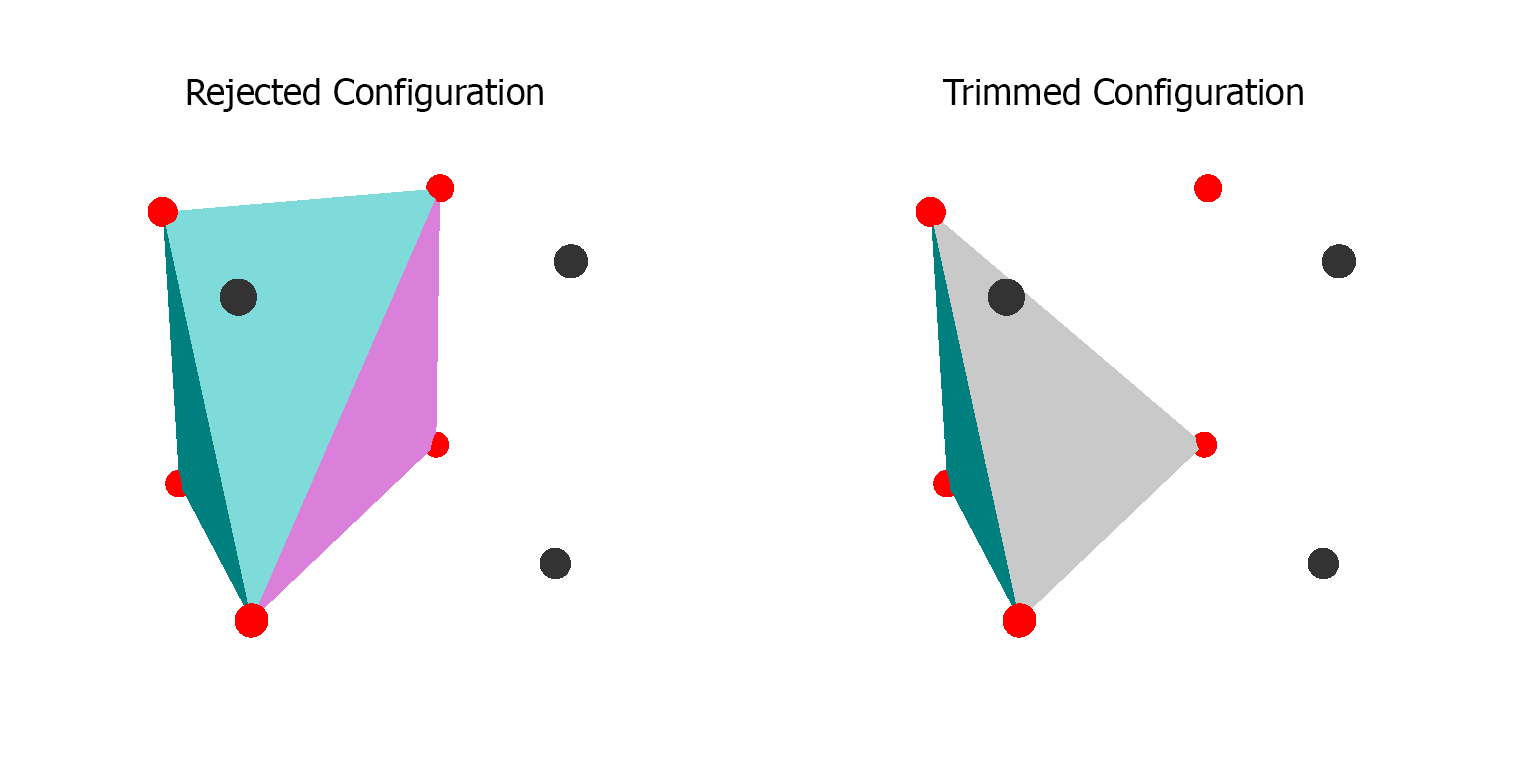
<style>
.page{position:relative;width:1536px;height:768px;background:#ffffff}
.page>*{position:absolute;margin:0}
.t1{font:36px "Tahoma";color:#000000}
</style>
<div class="page">
<p class="t1" style="left:187px;top:78px;width:356px;height:34px">Rejected Configuration</p>
<p class="t1" style="left:943px;top:78px;width:360px;height:34px">Trimmed Configuration</p>
</div>
